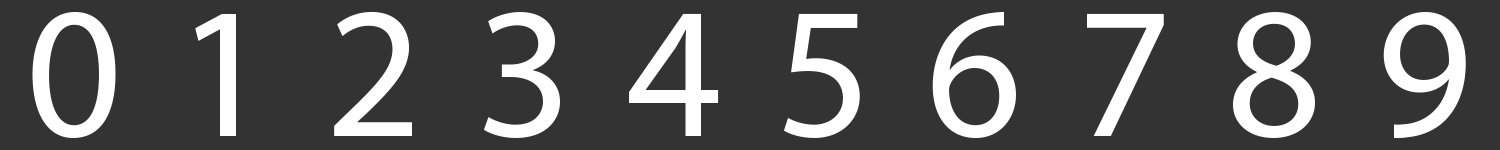
<style>
.page{position:relative;width:1500px;height:150px;background:#333333}
.page>*{position:absolute;margin:0}
.t1{font:187.7px "MyriadPro-Regular";color:#ffffff}
.t2{font:187.5px "MyriadPro-Regular";color:#ffffff}
</style>
<div class="page">
<p class="t1" style="left:32px;top:12px;width:84px;height:126px">0</p>
<p class="t1" style="left:195px;top:14px;width:41px;height:122px">1</p>
<p class="t1" style="left:334px;top:11px;width:78px;height:125px">2</p>
<p class="t1" style="left:483px;top:12px;width:77px;height:126px">3</p>
<p class="t1" style="left:629px;top:13px;width:90px;height:123px">4</p>
<p class="t1" style="left:783px;top:13px;width:77px;height:125px">5</p>
<p class="t1" style="left:932px;top:12px;width:84px;height:126px">6</p>
<p class="t1" style="left:1087px;top:13px;width:77px;height:123px">7</p>
<p class="t1" style="left:1233px;top:12px;width:82px;height:126px">8</p>
<p class="t2" style="left:1383px;top:12px;width:83px;height:127px">9</p>
</div>
